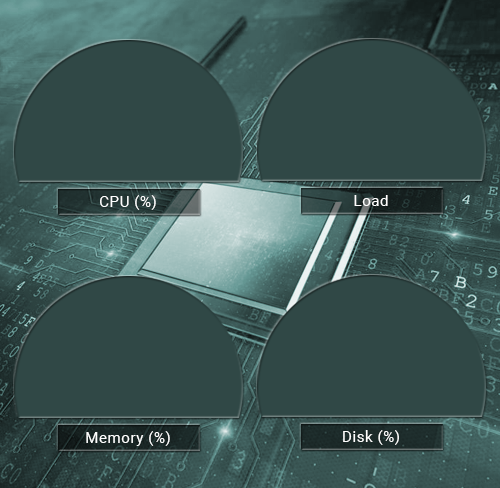
<style>
.page{position:relative;width:500px;height:488px;background:#304846}
.page>*{position:absolute;margin:0}
.t1{font:15px "Roboto-Regular";letter-spacing:0.04em;color:#ffffff}
</style>
<div class="page">
<p class="t1" style="left:100px;top:195px;width:56px;height:15px">CPU (%)</p>
<p class="t1" style="left:354px;top:195px;width:34px;height:11px">Load</p>
<p class="t1" style="left:86px;top:431px;width:84px;height:15px">Memory (%)</p>
<p class="t1" style="left:343px;top:430px;width:56px;height:15px">Disk (%)</p>
</div>
